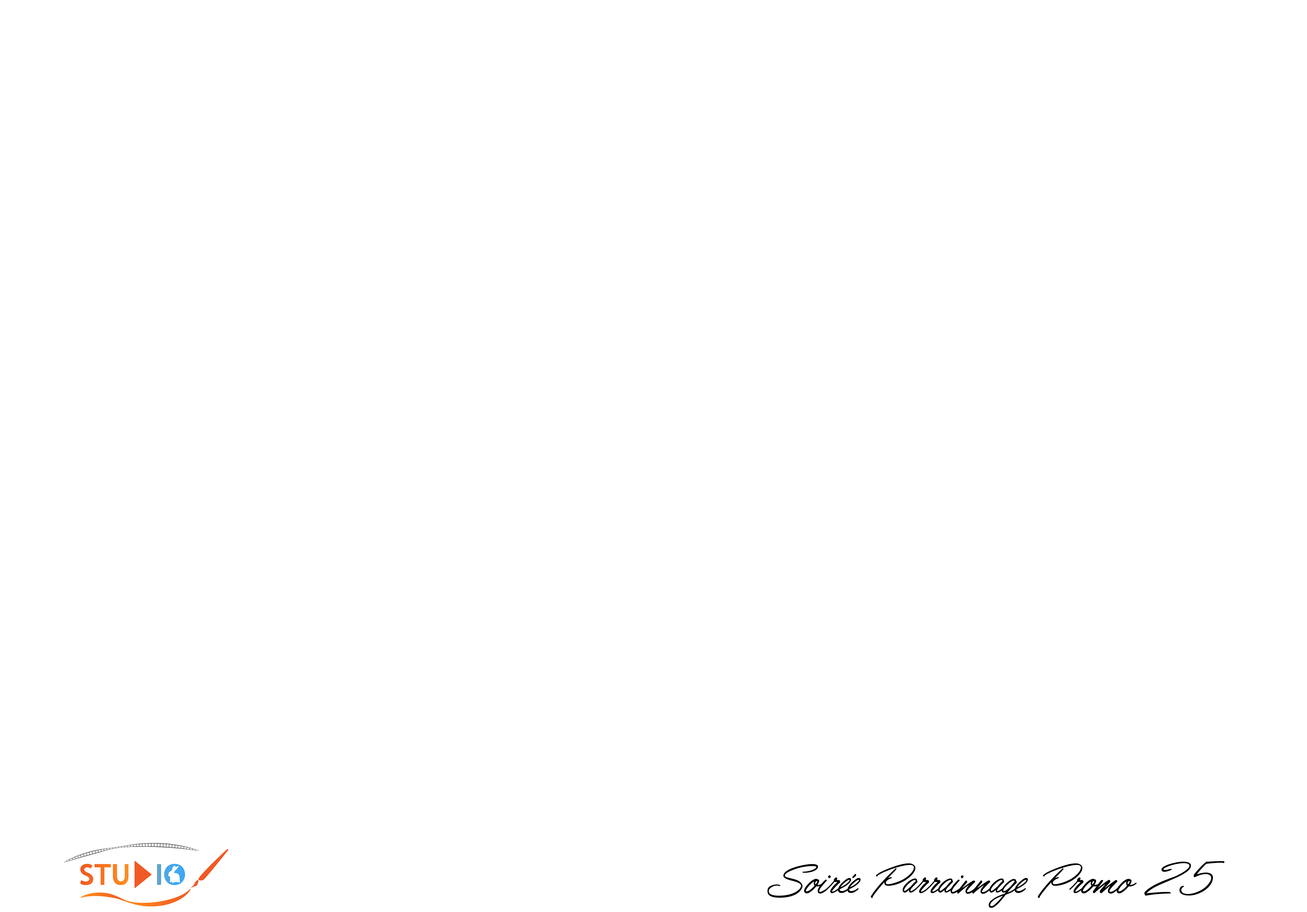
<style>
.page{position:relative;width:1307px;height:912px;background:#ffffff}
.page>*{position:absolute;margin:0}
.t1{font:51.4px "LisbonScript-Regular";color:#000000}
</style>
<div class="page">
<p class="t1" style="left:768px;top:861px;width:457px;height:47px">Soirée Parrainnage Promo 25</p>
</div>
